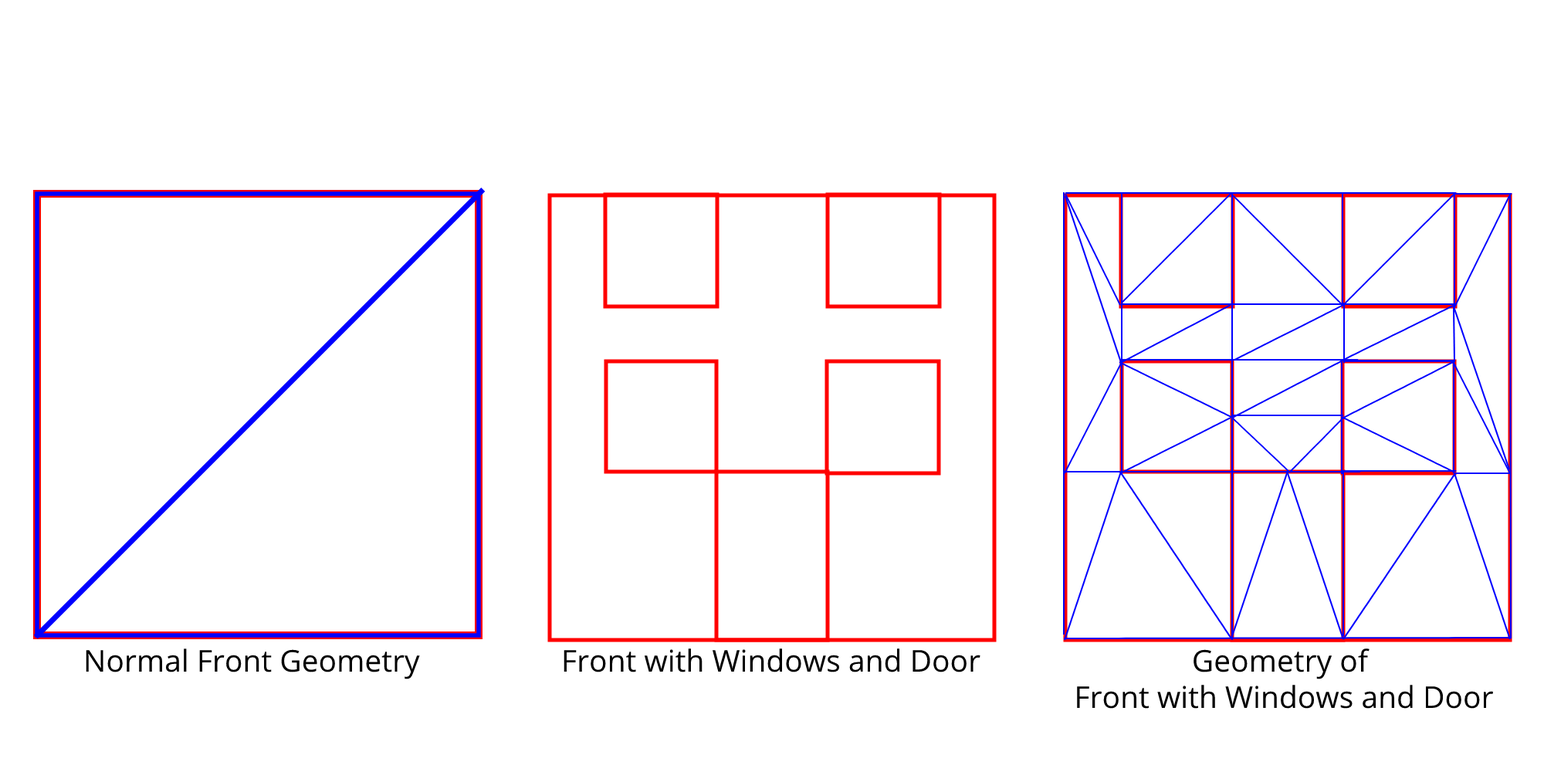
<style>
.page{position:relative;width:1544px;height:772px;background:#ffffff}
.page>*{position:absolute;margin:0}
.t1{font:30.1px "OpenSans-Regular";color:#000000}
</style>
<div class="page">
<p class="t1" style="left:86px;top:649px;width:334px;height:30px">Normal Front Geometry</p>
<p class="t1" style="left:564px;top:649px;width:417px;height:24px">Front with Windows and Door</p>
<p class="t1" style="left:1077px;top:649px;width:416px;height:60px;text-align:center">Geometry of <br>Front with Windows and Door</p>
</div>
